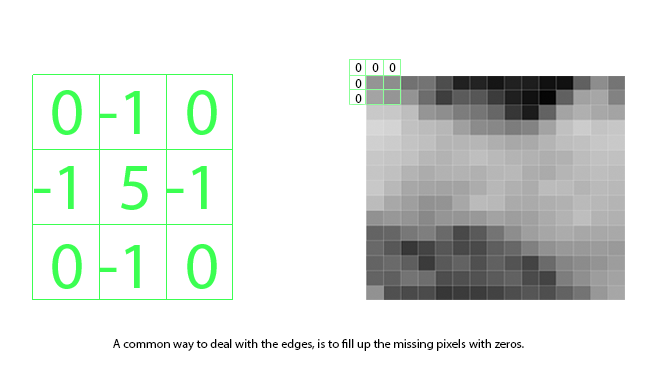
<style>
.page{position:relative;width:666px;height:375px;background:#ffffff}
.page>*{position:absolute;margin:0}
.t1{font:12.5px "MyriadPro-Regular";color:#000000}
</style>
<div class="page">
<p class="t1" style="left:355px;top:63px;width:41px;height:9px">0    0    0</p>
<p class="t1" style="left:355px;top:79px;width:7px;height:24px">0<br>0</p>
<p class="t1" style="left:113px;top:339px;width:411px;height:12px">A common way to deal with the edges, is to fill up the missing pixels with zeros.</p>
</div>
